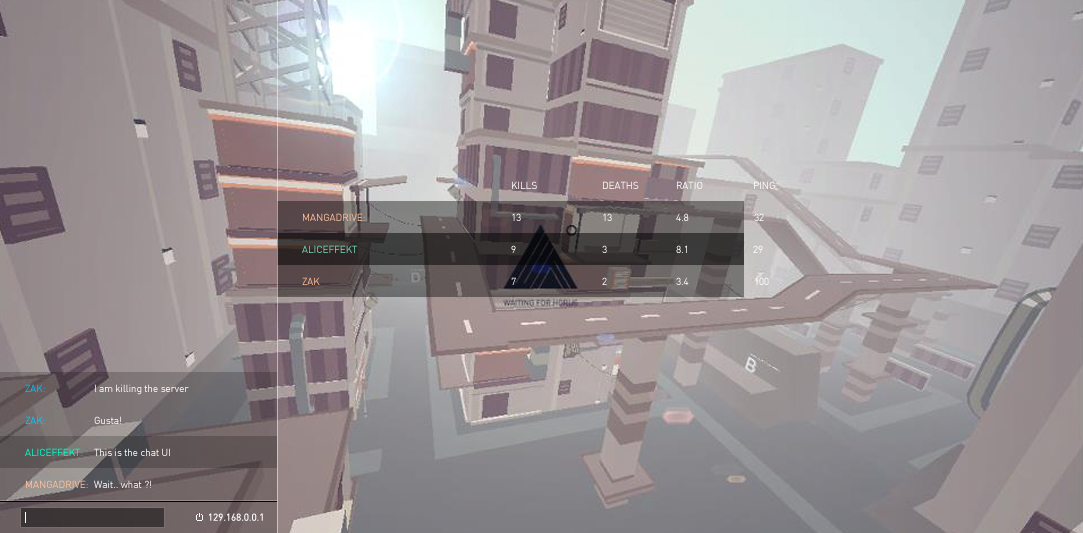
<style>
.page{position:relative;width:1083px;height:533px}
.page>*{position:absolute;margin:0}
.t1{font:10px "DIN";letter-spacing:-0.01em;color:#ffffff}
.t2{font:10px "DIN";letter-spacing:-0.01em;color:#ffc09a}
.t3{font:10px "DIN";letter-spacing:-0.01em}
.t4{font:10px "DIN";letter-spacing:-0.01em;color:#72dec2}
.t5{font:10px "DIN";letter-spacing:-0.01em;color:#00ffcc}
</style>
<div class="page">
<p class="t1" style="left:512px;top:181px;width:25px;height:8px">KILLS</p>
<p class="t1" style="left:603px;top:181px;width:36px;height:8px">DEATHS</p>
<p class="t1" style="left:677px;top:181px;width:26px;height:8px">RATIO</p>
<p class="t1" style="left:754px;top:181px;width:21px;height:8px">PING</p>
<p class="t2" style="left:303px;top:213px;width:62px;height:8px">MANGADRIVE:</p>
<p class="t3" style="left:512px;top:213px;width:9px;height:8px">13</p>
<p class="t3" style="left:603px;top:213px;width:9px;height:8px">13</p>
<p class="t1" style="left:676px;top:213px;width:13px;height:8px">4.8</p>
<p class="t1" style="left:754px;top:213px;width:10px;height:8px">32</p>
<p class="t4" style="left:302px;top:245px;width:56px;height:8px">ALICEFFEKT</p>
<p class="t1" style="left:511px;top:245px;width:5px;height:8px">9</p>
<p class="t3" style="left:602px;top:245px;width:5px;height:8px">3</p>
<p class="t1" style="left:676px;top:245px;width:11px;height:8px">8.1</p>
<p class="t1" style="left:753px;top:245px;width:10px;height:8px">29</p>
<p class="t3" style="left:302px;top:277px;width:18px;height:8px">ZAK</p>
<p class="t3" style="left:511px;top:277px;width:5px;height:8px">7</p>
<p class="t3" style="left:602px;top:277px;width:5px;height:8px">2</p>
<p class="t3" style="left:676px;top:277px;width:13px;height:8px">3.4</p>
<p class="t1" style="left:755px;top:277px;width:14px;height:8px">100</p>
<p class="t3" style="left:25px;top:384px;width:20px;height:8px">ZAK:</p>
<p class="t1" style="left:95px;top:384px;width:94px;height:11px">I am killing the server</p>
<p class="t3" style="left:25px;top:416px;width:20px;height:8px">ZAK:</p>
<p class="t3" style="left:94px;top:416px;width:27px;height:8px">Gusta!</p>
<p class="t5" style="left:25px;top:448px;width:58px;height:8px">ALICEFFEKT:</p>
<p class="t1" style="left:94px;top:448px;width:76px;height:8px">This is the chat UI</p>
<p class="t2" style="left:26px;top:480px;width:62px;height:8px">MANGADRIVE:</p>
<p class="t1" style="left:94px;top:480px;width:57px;height:8px">Wait.. what ?!</p>
<p class="t1" style="left:209px;top:513px;width:54px;height:8px">129.168.0.0.1</p>
</div>
